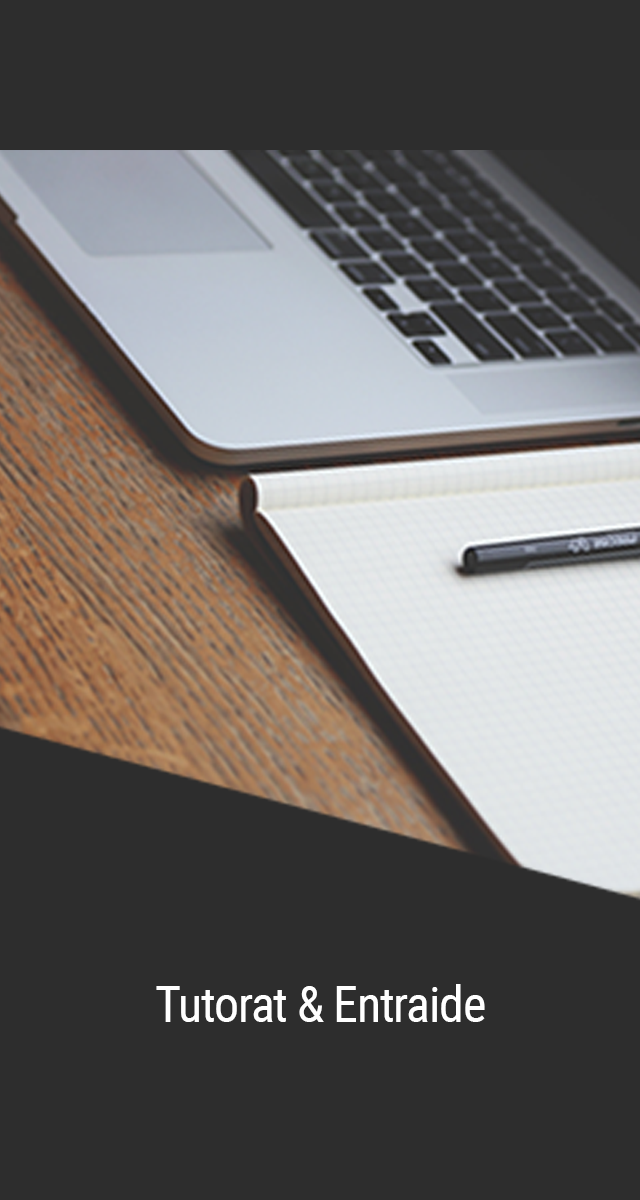
<style>
.page{position:relative;width:640px;height:1200px;background:#2d2d2d}
.page>*{position:absolute;margin:0}
.t1{font:50px "RobotoCondensed-Regular";letter-spacing:-0.025em;color:#ffffff}
</style>
<div class="page">
<p class="t1" style="left:156px;top:984px;width:329px;height:38px">Tutorat &amp; Entraide</p>
</div>
